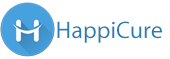
<style>
.page{position:relative;width:170px;height:59px;background:#ffffff}
.page>*{position:absolute;margin:0}
.t1{font:24px "MyriadPro-Regular";color:#287db6}
</style>
<div class="page">
<p class="t1" style="left:57px;top:21px;width:105px;height:22px">HappiCure</p>
</div>
